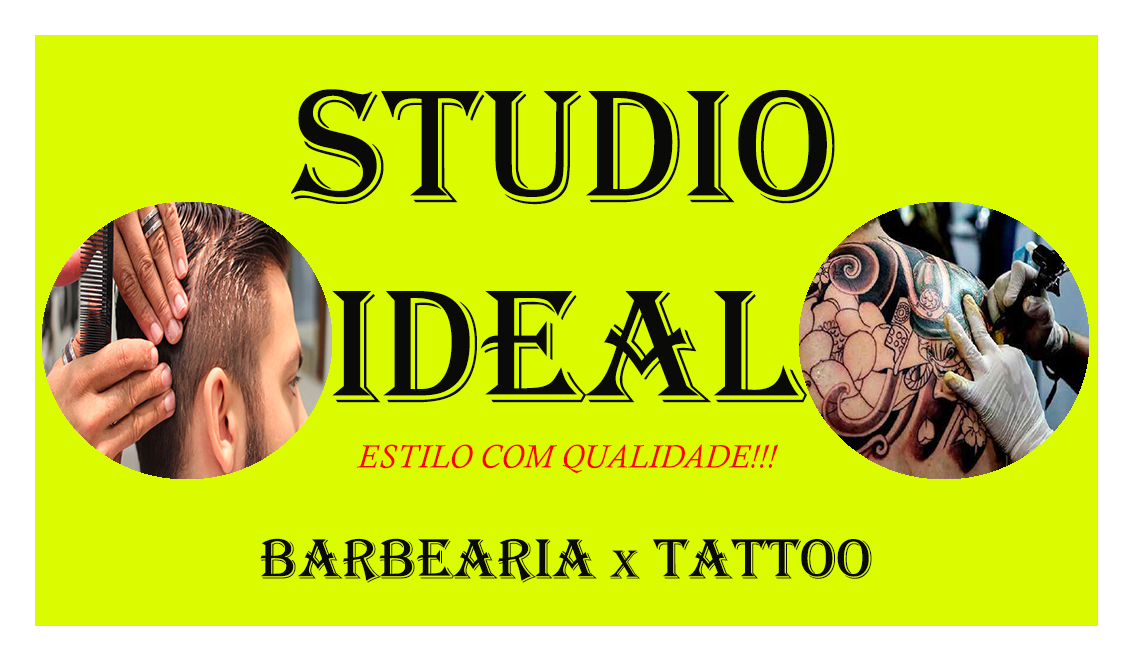
<style>
.page{position:relative;width:1134px;height:661px;background:#dbfb00}
.page>*{position:absolute;margin:0}
.t1{font:166.7px "Algerian";color:#0a0a09}
.t2{font:33.3px "CalistoMT-Italic";color:#fd0202}
.t3{font:58.3px "Algerian";color:#0a0a09}
.t4{font:41.7px "Algerian";color:#0a0a09}
</style>
<div class="page">
<p class="t1" style="left:291px;top:89px;width:544px;height:314px;text-align:center">Studio<br>Ideal</p>
<p class="t2" style="left:357px;top:444px;width:422px;height:29px">ESTILO COM QUALIDADE!!!</p>
<p class="t3" style="left:260px;top:538px;width:612px;height:45px">Barbearia <span class="t4">x</span> Tattoo</p>
</div>
